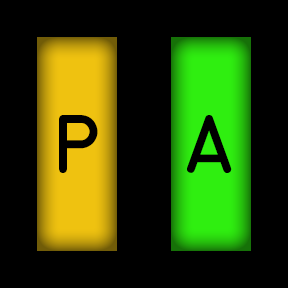
<style>
.page{position:relative;width:288px;height:288px;background:#000000}
.page>*{position:absolute;margin:0}
.t1{font:58px "MS-33558-Regular";letter-spacing:-0.04em;color:#000000}
</style>
<div class="page">
<p class="t1" style="left:59px;top:115px;width:39px;height:58px">P</p>
<p class="t1" style="left:187px;top:115px;width:45px;height:58px">A</p>
</div>
